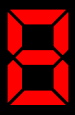
<style>
.page{position:relative;width:75px;height:115px;background:#000000}
.page>*{position:absolute;margin:0}
.t1{font:149.4px "DS-Digital-Bold";color:#ff0000}
</style>
<div class="page">
<p class="t1" style="left:7px;top:9px;width:62px;height:96px">8</p>
<p class="t1" style="left:7px;top:9px;width:62px;height:96px">8</p>
</div>
